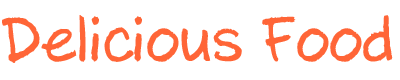
<style>
.page{position:relative;width:400px;height:80px;background:#ffffff}
.page>*{position:absolute;margin:0}
.t1{font:60px "AxureHandwriting";color:#ff6537}
</style>
<div class="page">
<p class="t1" style="left:2px;top:15px;width:391px;height:48px">Delicious Food</p>
</div>
